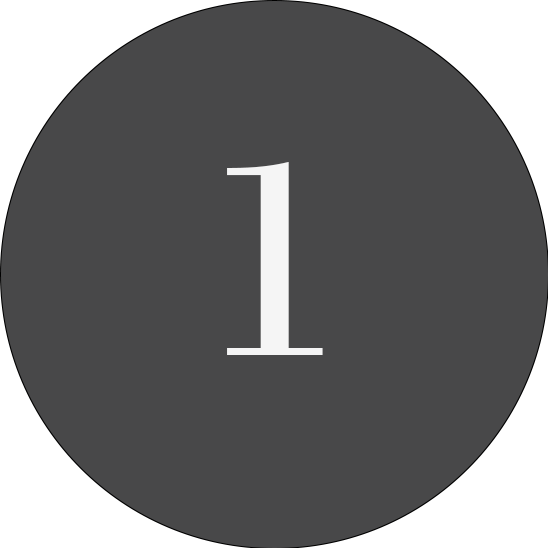
<style>
.page{position:relative;width:548px;height:548px;background:#484849}
.page>*{position:absolute;margin:0}
.t1{font:300px "BodoniMT";color:#f5f5f5}
</style>
<div class="page">
<p class="t1" style="left:227px;top:162px;width:96px;height:193px">1</p>
</div>
